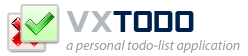
<style>
.page{position:relative;width:248px;height:56px;background:#ffffff}
.page>*{position:absolute;margin:0}
.t1{font:30px "SFAlienEncountersSolid";color:#00204c}
.t2{font:30px "SFAlienEncountersSolid";color:#afb9bf}
.t3{font:14px "MyriadPro-It";color:#999999}
</style>
<div class="page">
<p class="t1" style="left:66px;top:11px;width:128px;height:21px"><span class="t2">vx</span>todo</p>
<p class="t3" style="left:66px;top:40px;width:174px;height:13px">a personal todo-list application</p>
</div>
